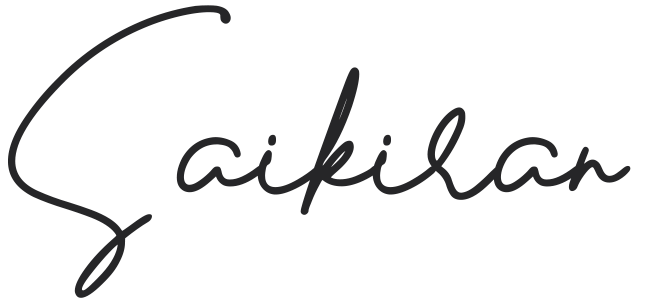
<style>
.page{position:relative;width:652px;height:300px;background:#ffffff}
.page>*{position:absolute;margin:0}
.t1{font:294.6px "DarlingtonDemo";color:#262628}
</style>
<div class="page">
<p class="t1" style="left:8px;top:5px;width:623px;height:293px">Saikiran</p>
</div>
